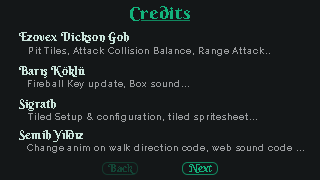
<style>
.page{position:relative;width:320px;height:180px;background:#141718}
.page>*{position:absolute;margin:0}
.t1{font:17.2px "BerkshireSwash-Regular";letter-spacing:0.025em;color:#12b27b;scale:1.18 1}
.t2{font:12px "BerkshireSwash-Regular";letter-spacing:0.025em;color:#cae4db}
.t3{font:9px "Raleway-Regular";letter-spacing:0.105em;color:#9b9d9f}
.t4{font:10.7px "BerkshireSwash-Regular";letter-spacing:0.025em;color:#134636}
.t5{font:10.7px "BerkshireSwash-Regular";letter-spacing:0.025em;color:#12b27b}
</style>
<div class="page">
<p class="t1" style="left:130px;top:6px;width:60px;height:15px">Credits</p>
<p class="t2" style="left:19px;top:32px;width:110px;height:12px">Ezovex Dickson Goh</p>
<p class="t3" style="left:29px;top:47px;width:241px;height:9px">Pit Tiles, Attack Collision Balance, Range Attack..</p>
<p class="t2" style="left:19px;top:66px;width:66px;height:12px">Barış Köklü</p>
<p class="t3" style="left:28px;top:80px;width:161px;height:9px">Fireball Key update, Box sound...</p>
<p class="t2" style="left:19px;top:99px;width:37px;height:12px">Sigrath</p>
<p class="t3" style="left:28px;top:113px;width:229px;height:9px">Tiled Setup &amp; configuration, tiled spritesheet...</p>
<p class="t2" style="left:19px;top:130px;width:64px;height:12px">Semih Yıldız</p>
<p class="t3" style="left:27px;top:144px;width:277px;height:9px">Change anim on walk direction code, web sound code ...</p>
<p class="t4" style="left:108px;top:164px;width:27px;height:10px">Back</p>
<p class="t5" style="left:189px;top:164px;width:23px;height:9px">Next</p>
</div>
